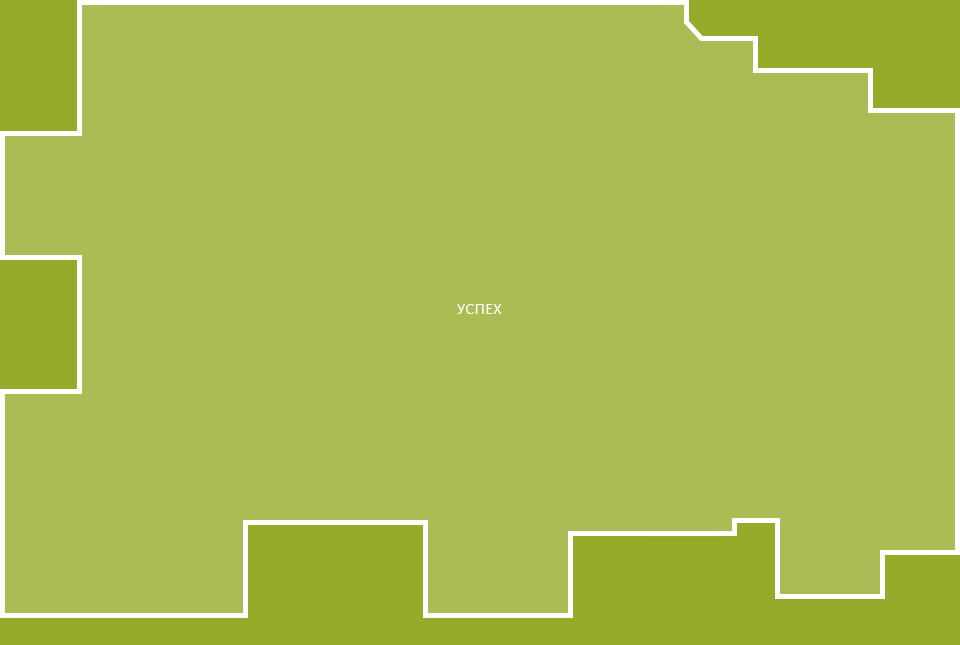
<style>
.page{position:relative;width:960px;height:645px;background:#a9bd54}
.page>*{position:absolute;margin:0}
.t1{font:14px "SegoeUI";letter-spacing:0.05em;color:#ffffff;text-transform:uppercase}
</style>
<div class="page">
<p class="t1" style="left:457px;top:304px;width:45px;height:10px">Успех</p>
</div>
